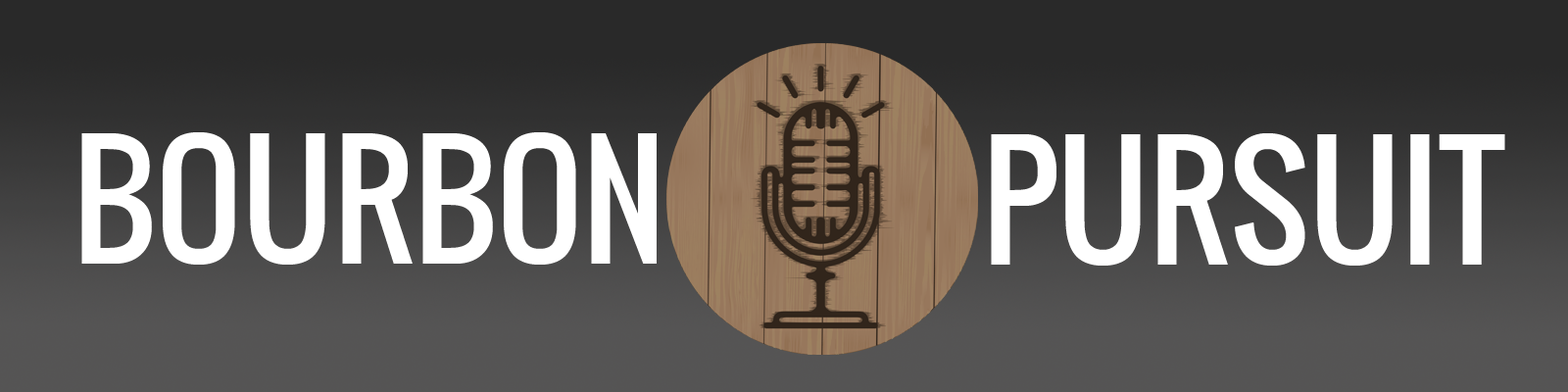
<style>
.page{position:relative;width:1568px;height:392px}
.page>*{position:absolute;margin:0}
.t1{font:149px "Oswald-Regular";color:#ffffff}
</style>
<div class="page">
<p class="t1" style="left:81px;top:132px;width:576px;height:133px">BOURBON</p>
<p class="t1" style="left:991px;top:133px;width:514px;height:133px">PURSUIT</p>
</div>
